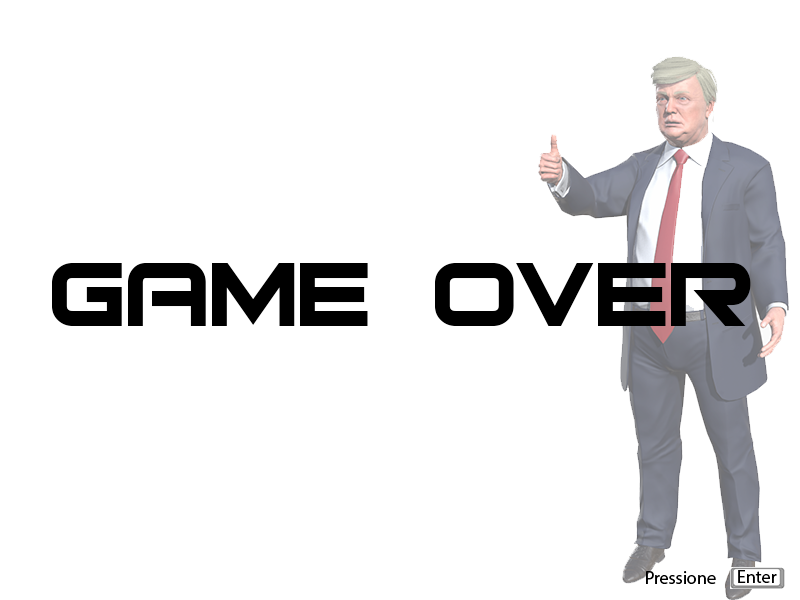
<style>
.page{position:relative;width:800px;height:600px;background:#ffffff}
.page>*{position:absolute;margin:0}
.t1{font:123.3px "Bitsumishi";color:#000000}
.t2{font:18px "MyriadHebrew-Regular";color:#000000}
</style>
<div class="page">
<p class="t1" style="left:52px;top:263px;width:699px;height:63px">GAME OVER</p>
<p class="t2" style="left:646px;top:571px;width:70px;height:13px">Pressione</p>
<p class="t2" style="left:738px;top:570px;width:39px;height:13px">Enter</p>
</div>
